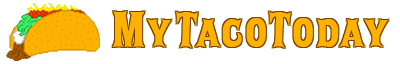
<style>
.page{position:relative;width:400px;height:64px;background:#ffffff}
.page>*{position:absolute;margin:0}
.t1{font:48px "P22Posada-Regular";letter-spacing:0.05em;color:#fdb100}
</style>
<div class="page">
<p class="t1" style="left:112px;top:11px;width:277px;height:37px">MyTacoToday</p>
</div>
